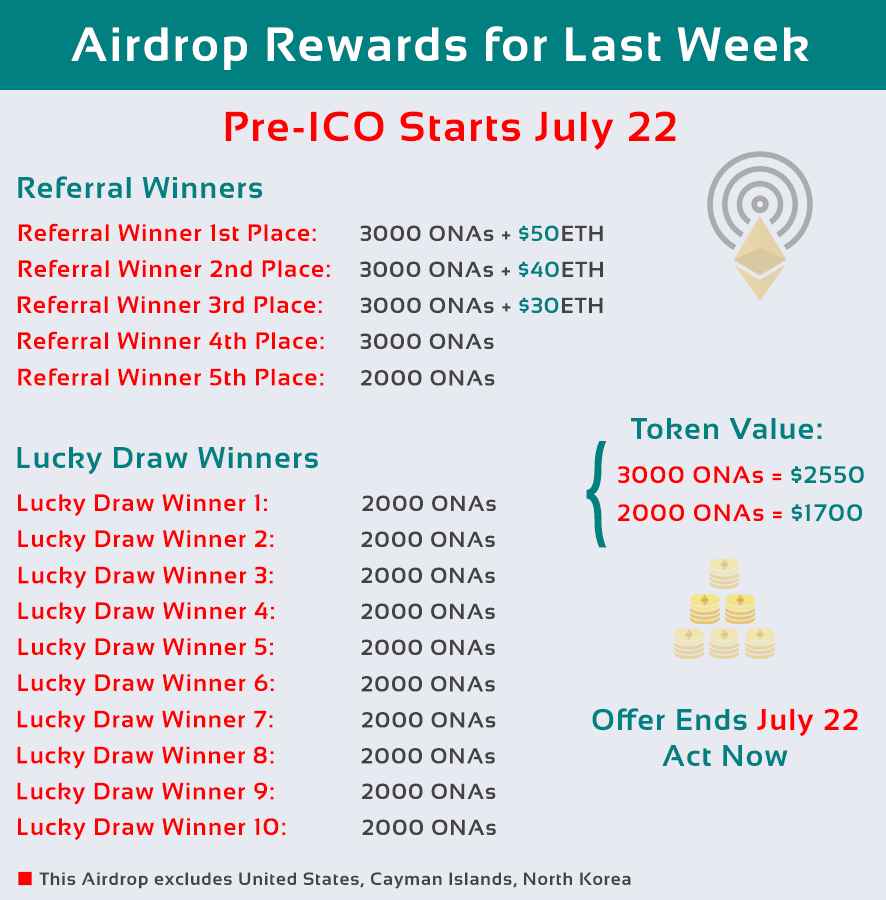
<style>
.page{position:relative;width:886px;height:900px;background:#e8eaf1}
.page>*{position:absolute;margin:0}
.t1{font:48px "Sansation-Bold";letter-spacing:0.05em;color:#ffffff}
.t2{font:42px "Sansation-Bold";letter-spacing:0.05em;color:#ff0000}
.t3{font:30px "Sansation-Bold";letter-spacing:0.05em;color:#008080}
.t4{font:24px "Sansation-Bold";letter-spacing:0.05em;color:#ff0000}
.t5{font:22px "Sansation-Bold";letter-spacing:0.05em;color:#434244}
.t6{font:22px "Sansation-Bold";letter-spacing:0.05em;color:#008080}
.t7{font:120px "Sansation-Regular";letter-spacing:0.05em;color:#008080;scale:0.63 1}
.t8{font:24px "Sansation-Bold";letter-spacing:0.05em;color:#008080}
.t9{font:30px "Sansation-Bold";letter-spacing:0.05em;color:#ff0000}
.t10{font:18px "Sansation-Bold";letter-spacing:0.05em;color:#444444}
</style>
<div class="page">
<p class="t1" style="left:71px;top:26px;width:738px;height:44px">Airdrop Rewards for Last Week</p>
<p class="t2" style="left:225px;top:111px;width:451px;height:39px">Pre-ICO Starts July 22</p>
<p class="t3" style="left:18px;top:176px;width:245px;height:23px">Referral Winners</p>
<p class="t4" style="left:18px;top:223px;width:298px;height:18px">Referral Winner 1st Place:</p>
<p class="t5" style="left:360px;top:225px;width:243px;height:16px">3000 ONAs + <span class="t6">$50</span>ETH</p>
<p class="t4" style="left:18px;top:259px;width:312px;height:18px">Referral Winner 2nd Place:</p>
<p class="t5" style="left:360px;top:261px;width:243px;height:16px">3000 ONAs + <span class="t6">$40</span>ETH</p>
<p class="t4" style="left:17px;top:295px;width:305px;height:18px">Referral Winner 3rd Place:</p>
<p class="t5" style="left:361px;top:297px;width:242px;height:16px">3000 ONAs + <span class="t6">$30</span>ETH</p>
<p class="t4" style="left:18px;top:331px;width:306px;height:18px">Referral Winner 4th Place:</p>
<p class="t5" style="left:360px;top:333px;width:134px;height:16px">3000 ONAs</p>
<p class="t4" style="left:18px;top:368px;width:306px;height:18px">Referral Winner 5th Place:</p>
<p class="t5" style="left:361px;top:370px;width:134px;height:16px">2000 ONAs</p>
<p class="t3" style="left:631px;top:418px;width:191px;height:21px">Token Value:</p>
<p class="t3" style="left:17px;top:447px;width:301px;height:28px">Lucky Draw Winners</p>
<p class="t7" style="left:586px;top:441px;width:21px;height:107px">{</p>
<p class="t4" style="left:618px;top:466px;width:246px;height:17px">3000 ONAs = <span class="t8">$2550</span></p>
<p class="t4" style="left:18px;top:494px;width:249px;height:22px">Lucky Draw Winner 1:</p>
<p class="t5" style="left:362px;top:495px;width:134px;height:16px">2000 ONAs</p>
<p class="t4" style="left:618px;top:504px;width:244px;height:17px">2000 ONAs = <span class="t8">$1700</span></p>
<p class="t4" style="left:18px;top:530px;width:256px;height:22px">Lucky Draw Winner 2:</p>
<p class="t5" style="left:361px;top:531px;width:134px;height:16px">2000 ONAs</p>
<p class="t4" style="left:18px;top:566px;width:255px;height:23px">Lucky Draw Winner 3:</p>
<p class="t5" style="left:361px;top:567px;width:134px;height:16px">2000 ONAs</p>
<p class="t4" style="left:18px;top:602px;width:256px;height:22px">Lucky Draw Winner 4:</p>
<p class="t5" style="left:361px;top:603px;width:134px;height:16px">2000 ONAs</p>
<p class="t4" style="left:18px;top:638px;width:255px;height:22px">Lucky Draw Winner 5:</p>
<p class="t5" style="left:361px;top:639px;width:134px;height:16px">2000 ONAs</p>
<p class="t4" style="left:18px;top:673px;width:256px;height:23px">Lucky Draw Winner 6:</p>
<p class="t5" style="left:361px;top:676px;width:134px;height:16px">2000 ONAs</p>
<p class="t4" style="left:17px;top:710px;width:256px;height:23px">Lucky Draw Winner 7:</p>
<p class="t5" style="left:362px;top:712px;width:134px;height:16px">2000 ONAs</p>
<p class="t3" style="left:592px;top:708px;width:266px;height:58px;text-align:center">Offer Ends <span class="t9">July 22<br></span>Act Now</p>
<p class="t4" style="left:17px;top:746px;width:257px;height:23px">Lucky Draw Winner 8:</p>
<p class="t5" style="left:361px;top:748px;width:134px;height:16px">2000 ONAs</p>
<p class="t4" style="left:17px;top:782px;width:257px;height:23px">Lucky Draw Winner 9:</p>
<p class="t5" style="left:362px;top:783px;width:134px;height:16px">2000 ONAs</p>
<p class="t4" style="left:18px;top:818px;width:268px;height:22px">Lucky Draw Winner 10:</p>
<p class="t5" style="left:362px;top:819px;width:134px;height:16px">2000 ONAs</p>
<p class="t10" style="left:39px;top:872px;width:592px;height:17px">This Airdrop excludes United States, Cayman Islands, North Korea</p>
</div>
